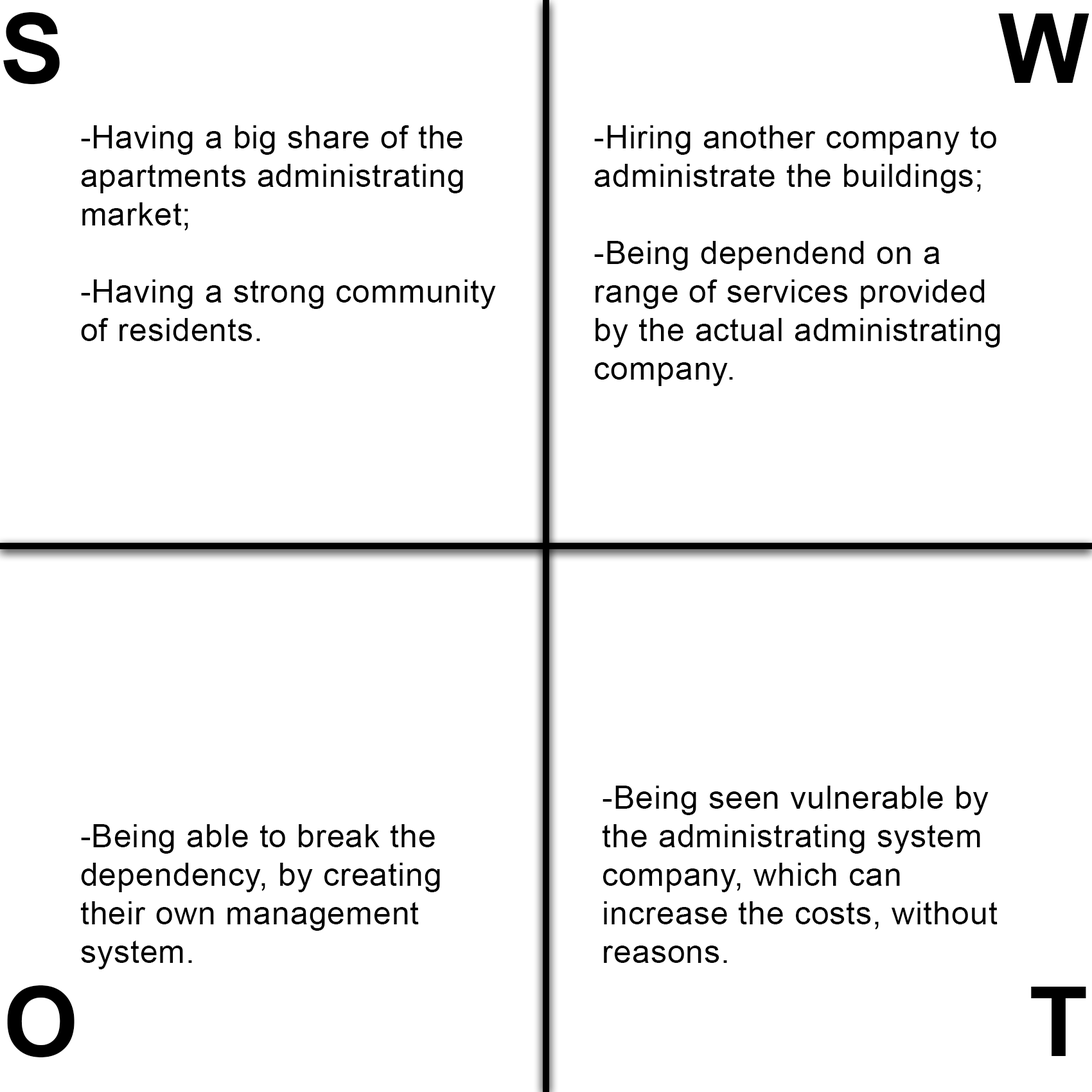
<style>
.page{position:relative;width:1092px;height:1092px;background:#ffffff}
.page>*{position:absolute;margin:0}
.t1{font:96.4px "Arial-BoldMT";letter-spacing:0.02em;color:#000000}
.t2{font:32.1px "ArialMT";letter-spacing:0.02em;color:#000000}
</style>
<div class="page">
<p class="t1" style="left:3px;top:12px;width:57px;height:72px">S</p>
<p class="t1" style="left:998px;top:13px;width:91px;height:70px">W</p>
<p class="t2" style="left:81px;top:125px;width:415px;height:216px">-Having a big share of the<br>apartments administrating<br>market;<br><br>-Having a strong community<br>of residents.</p>
<p class="t2" style="left:594px;top:125px;width:406px;height:261px">-Hiring another company to<br>administrate the buildings;<br><br>-Being dependend on a <br>range of services provided<br>by the actual administrating<br>company.</p>
<p class="t2" style="left:602px;top:786px;width:396px;height:177px">-Being seen vulnerable by<br>the administrating system<br>company, which can <br>increase the costs, without<br>reasons.</p>
<p class="t2" style="left:80px;top:824px;width:360px;height:145px">-Being able to break the<br>dependency, by creating<br>their own management<br>system.</p>
<p class="t1" style="left:7px;top:985px;width:68px;height:72px">O</p>
<p class="t1" style="left:1031px;top:987px;width:55px;height:69px">T</p>
</div>
